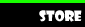
<style>
.page{position:relative;width:85px;height:27px;background:#000000}
.page>*{position:absolute;margin:0}
.t1{font:14px "ShowcardGothic-Reg";color:#ffffff}
</style>
<div class="page">
<p class="t1" style="left:39px;top:10px;width:43px;height:12px">STORE</p>
</div>
